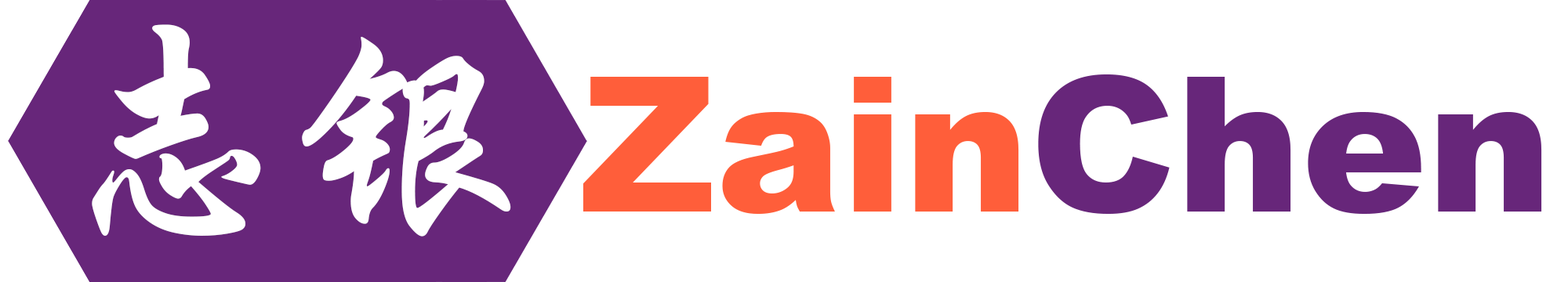
<style>
.page{position:relative;width:1568px;height:282px;background:#ffffff}
.page>*{position:absolute;margin:0}
.t1{font:235.2px "STXingkai";color:#ffffff}
.t2{font:188.2px "Arial-Black";color:#ff5e3a}
.t3{font:188.2px "Arial-Black";color:#67267a}
</style>
<div class="page">
<p class="t1" style="left:92px;top:24px;width:419px;height:213px">志银</p>
<p class="t2" style="left:583px;top:74px;width:959px;height:140px">Zain<span class="t3">Chen</span></p>
</div>
